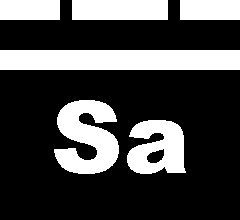
<style>
.page{position:relative;width:240px;height:220px;background:#000000}
.page>*{position:absolute;margin:0}
.t1{font:12px "Arial-Black";color:#ffffff}
</style>
<div class="page">
<p class="t1" style="left:54px;top:100px;width:132px;height:74px;text-align:center">Sa</p>
</div>
